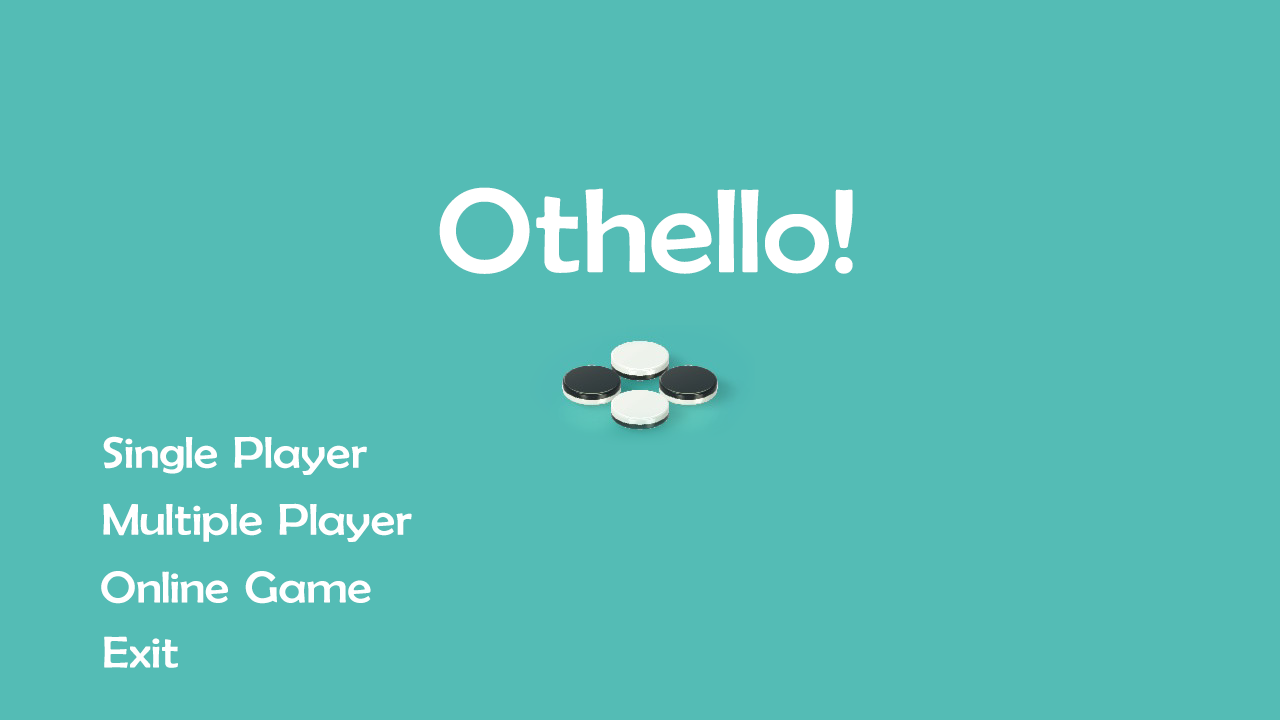
<style>
.page{position:relative;width:1280px;height:720px;background:#54bcb5}
.page>*{position:absolute;margin:0}
.t1{font:120px "BerlinSansFB-Reg";letter-spacing:0.05em;color:#ffffff;scale:1.12 1}
.t2{font:45px "BerlinSansFB-Reg";letter-spacing:0.05em;color:#ffffff;scale:1.12 1}
</style>
<div class="page">
<p class="t1" style="left:439px;top:187px;width:414px;height:87px">Othello!</p>
<p class="t2" style="left:103px;top:436px;width:264px;height:39px">Single Player</p>
<p class="t2" style="left:103px;top:503px;width:309px;height:39px">Multiple Player</p>
<p class="t2" style="left:101px;top:571px;width:270px;height:33px">Online Game</p>
<p class="t2" style="left:104px;top:636px;width:74px;height:32px">Exit</p>
</div>
